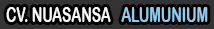
<style>
.page{position:relative;width:214px;height:29px;background:#333333}
.page>*{position:absolute;margin:0}
.t1{font:21.4px "ArialRoundedMTBold";color:#faf8f8;scale:0.65 1}
.t2{font:21.4px "ArialRoundedMTBold";color:#8fceef;scale:0.65 1}
</style>
<div class="page">
<p class="t1" style="left:6px;top:7px;width:202px;height:15px">CV. NUASANSA   <span class="t2">ALUMUNIUM</span></p>
</div>
